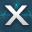
<style>
.page{position:relative;width:32px;height:32px}
.page>*{position:absolute;margin:0}
.t1{font:37.8px "BankGothicMediumC";color:#ebeded;scale:0.95 1}
</style>
<div class="page">
<p class="t1" style="left:4px;top:5px;width:25px;height:20px">X</p>
</div>
